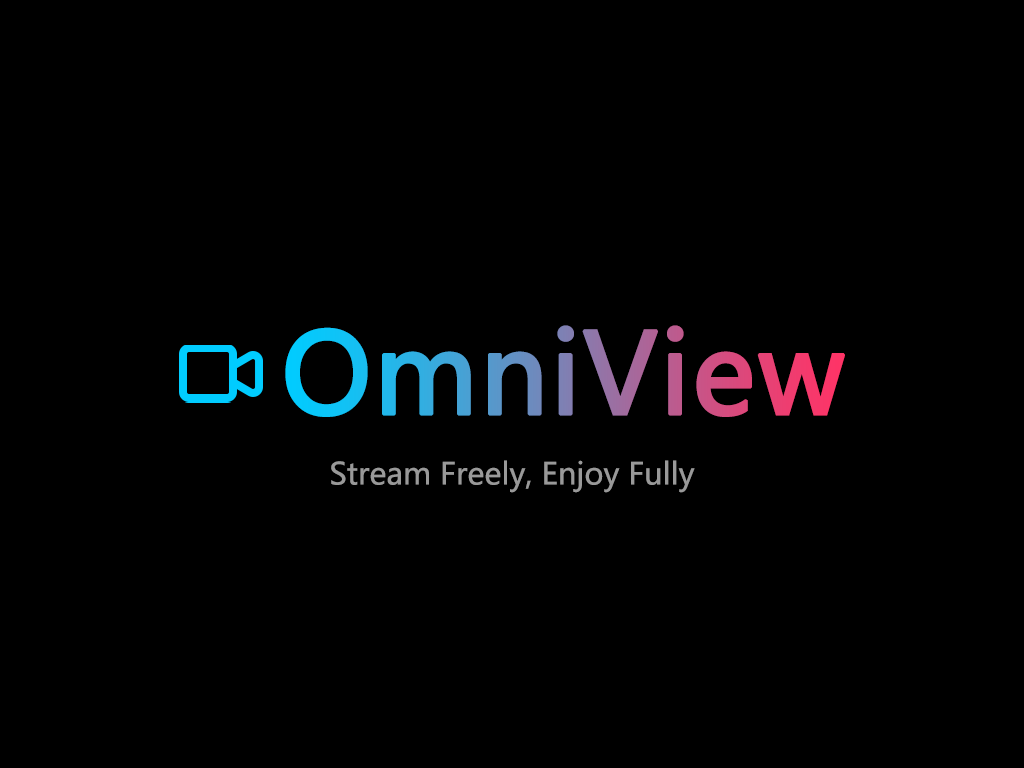
<style>
.page{position:relative;width:1024px;height:768px;background:#000000}
.page>*{position:absolute;margin:0}
.t1{font:110px "MicrosoftYaHei";font-weight:bold}
.t2{font:30px "MicrosoftYaHei";color:#999999}
</style>
<div class="page">
<p class="t1" style="left:285px;top:325px;width:560px;height:92px">OmniView</p>
<p class="t2" style="left:331px;top:460px;width:364px;height:33px">Stream Freely, Enjoy Fully</p>
</div>
